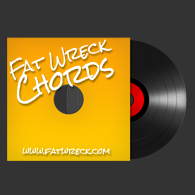
<style>
.page{position:relative;width:195px;height:195px;background:#333333}
.page>*{position:absolute;margin:0}
.t1{font:16.9px/24px "RockSalt";letter-spacing:-0.015em;color:#ffffff;scale:0.9 1}
.t2{font:25.4px/24px "RockSalt";letter-spacing:-0.015em;color:#ffffff;scale:0.9 1}
.t3{font:7.8px "RockSalt";letter-spacing:-0.015em;color:#ffffff}
</style>
<div class="page">
<p class="t1" style="left:9px;top:39px;width:105px;height:65px;text-align:center;rotate:-15deg">Fat Wreck<br><span class="t2">Chords</span></p>
<p class="t3" style="left:22px;top:147px;width:89px;height:8px">www.fatwreck.com</p>
</div>
